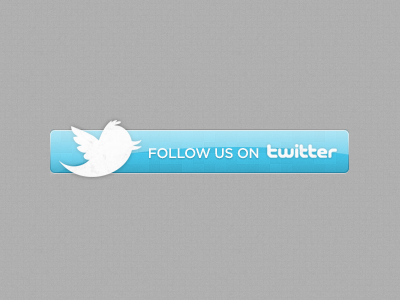
<style>
.page{position:relative;width:400px;height:300px;background:#afafaf}
.page>*{position:absolute;margin:0}
.t1{font:14px "Gotham-Medium";letter-spacing:-0.025em;color:#fafafa}
</style>
<div class="page">
<p class="t1" style="left:149px;top:148px;width:110px;height:11px">FOLLOW US ON</p>
</div>
